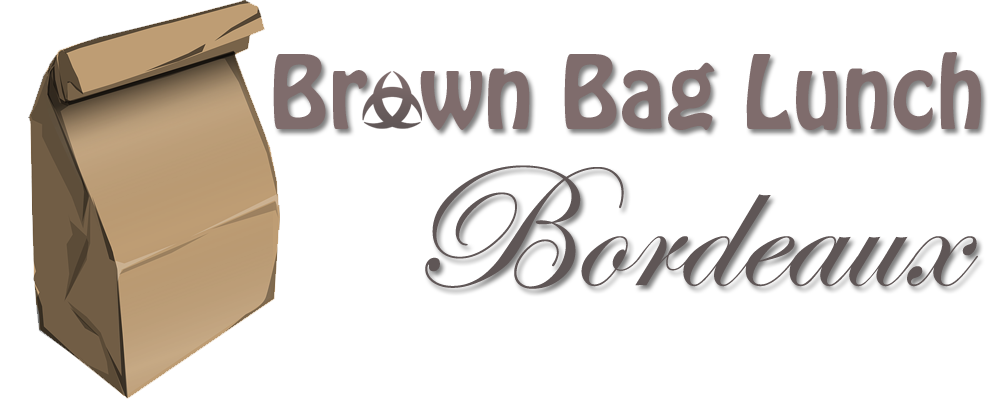
<style>
.page{position:relative;width:1000px;height:400px;background:#ffffff}
.page>*{position:absolute;margin:0}
.t1{font:90px "HoboStd";color:#7f6c6c}
.t2{font:180px "EdwardianScriptITC";color:#5f5656}
</style>
<div class="page">
<p class="t1" style="left:273px;top:52px;width:708px;height:78px">Br  wn Bag Lunch</p>
<p class="t2" style="left:425px;top:165px;width:553px;height:124px">Bordeaux</p>
</div>
